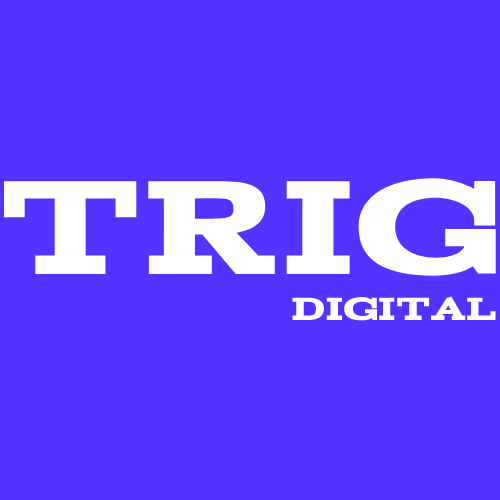
<style>
.page{position:relative;width:500px;height:500px;background:#5533ff}
.page>*{position:absolute;margin:0}
.t1{font:150px "Acknowledgement";color:#ffffff}
.t2{font:36px "Acknowledgement";color:#ffffff}
</style>
<div class="page">
<p class="t1" style="left:4px;top:178px;width:492px;height:98px">tRIG</p>
<p class="t2" style="left:292px;top:296px;width:204px;height:25px">DIGITAL</p>
</div>
